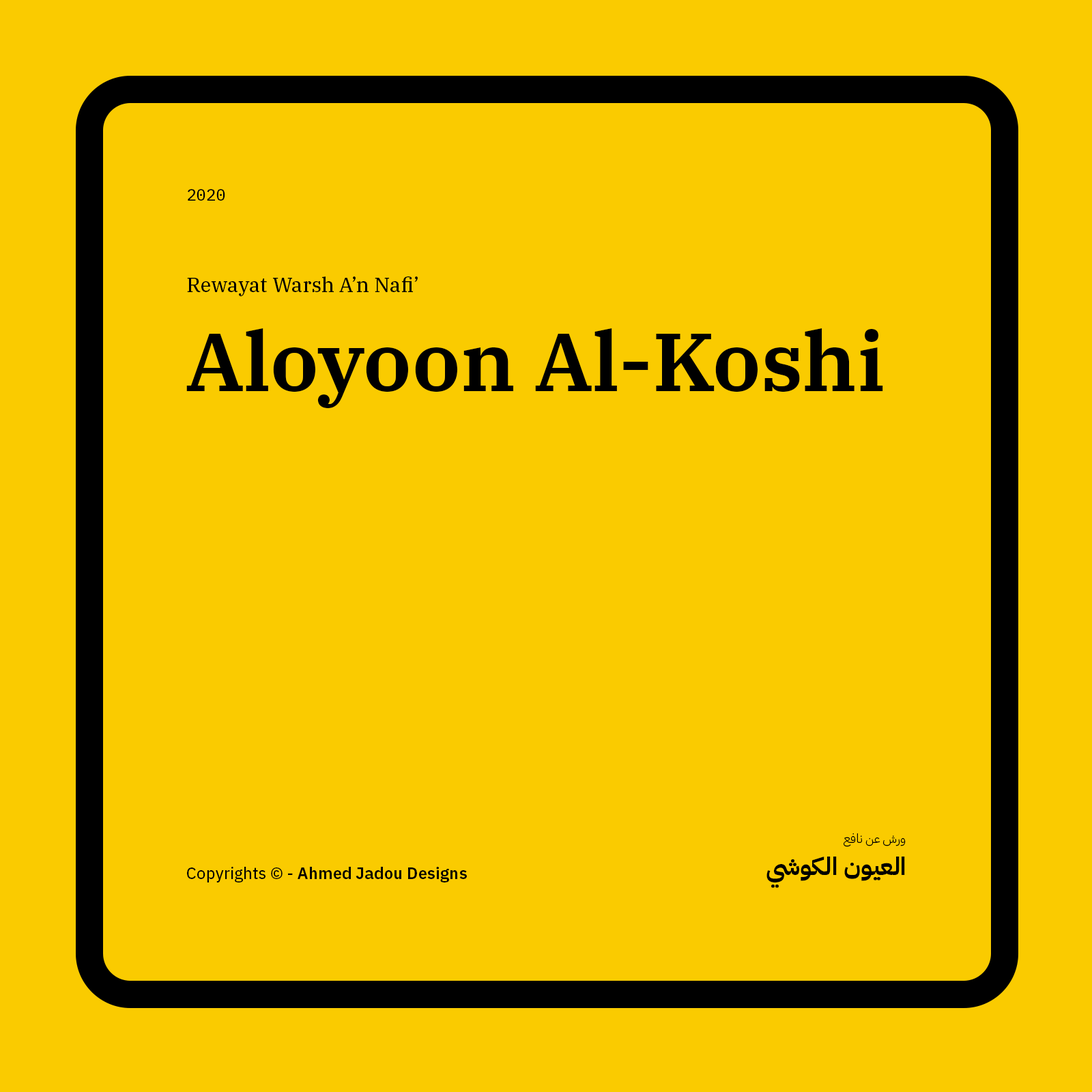
<style>
.page{position:relative;width:1092px;height:1092px;background:#facb00}
.page>*{position:absolute;margin:0}
.t1{font:16.4px "IBMPlexMono-Text";color:#000000}
.t2{font:20.5px "IBMPlexSerif-Text";color:#000000}
.t3{font:81.9px "IBMPlexSerif-SemiBold";color:#000000}
.t4{font:12.3px "IBMPlexArabic-Light";color:#000000}
.t5{font:24.6px "IBMPlexArabic-Bold";color:#000000}
.t6{font:16.4px "IBMPlexSans-SemiBold";color:#000000}
.t7{font:16.4px "IBMPlexSans-Text";color:#000000}
</style>
<div class="page">
<p class="t1" style="left:188px;top:189px;width:37px;height:12px">2020</p>
<p class="t2" style="left:187px;top:276px;width:231px;height:20px">Rewayat Warsh A’n Nafi’</p>
<p class="t3" style="left:186px;top:328px;width:697px;height:80px">Aloyoon Al-Koshi</p>
<p class="t4" style="left:844px;top:833px;width:62px;height:14px">ورش عن نافع</p>
<p class="t5" style="left:766px;top:857px;width:139px;height:31px">العيون الكوشي</p>
<p class="t6" style="left:187px;top:867px;width:280px;height:15px"><span class="t7">Copyrights © - </span>Ahmed Jadou Designs</p>
</div>
